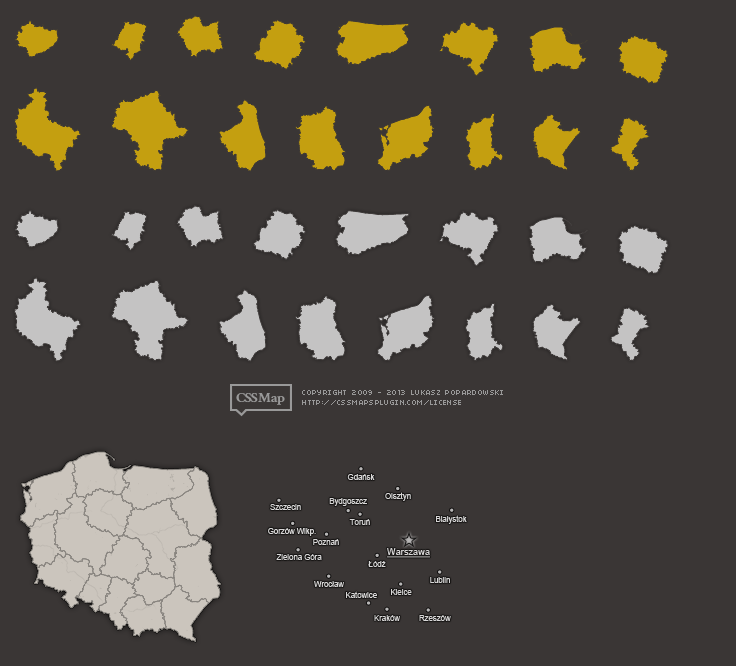
<style>
.page{position:relative;width:736px;height:666px;background:#3a3635}
.page>*{position:absolute;margin:0}
.t1{font:8px "ArialMT";color:#d8d7d7}
.t2{font:10.1px "ArialMT";color:#d8d7d7;text-decoration:underline;scale:0.91 1}
</style>
<div class="page">
<p class="t1" style="left:347px;top:474px;width:28px;height:6px">Gdańsk</p>
<p class="t1" style="left:385px;top:492px;width:26px;height:9px">Olsztyn</p>
<p class="t1" style="left:270px;top:504px;width:31px;height:6px">Szczecin</p>
<p class="t1" style="left:329px;top:498px;width:38px;height:8px">Bydgoszcz</p>
<p class="t1" style="left:349px;top:519px;width:21px;height:6px">Toruń</p>
<p class="t1" style="left:436px;top:515px;width:31px;height:9px">Białystok</p>
<p class="t1" style="left:268px;top:528px;width:48px;height:8px">Gorzów Wlkp.</p>
<p class="t1" style="left:313px;top:539px;width:26px;height:6px">Poznań</p>
<p class="t1" style="left:276px;top:554px;width:46px;height:6px">Zielona Góra</p>
<p class="t2" style="left:387px;top:548px;width:44px;height:10px">Warszawa</p>
<p class="t1" style="left:368px;top:561px;width:18px;height:6px">Łódź</p>
<p class="t1" style="left:314px;top:581px;width:30px;height:6px">Wrocław</p>
<p class="t1" style="left:430px;top:577px;width:20px;height:6px">Lublin</p>
<p class="t1" style="left:346px;top:591px;width:31px;height:7px">Katowice</p>
<p class="t1" style="left:391px;top:589px;width:21px;height:6px">Kielce</p>
<p class="t1" style="left:374px;top:615px;width:26px;height:6px">Kraków</p>
<p class="t1" style="left:419px;top:615px;width:32px;height:6px">Rzeszów</p>
</div>
